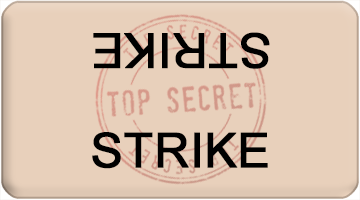
<style>
.page{position:relative;width:360px;height:200px;background:#e8d0bb}
.page>*{position:absolute;margin:0}
.t1{font:48px "ArialMT";color:#000000;font-weight:bold}
</style>
<div class="page">
<p class="t1" style="left:93px;top:32px;width:177px;height:37px;rotate:180deg">STRIKE</p>
<p class="t1" style="left:92px;top:132px;width:176px;height:37px">STRIKE</p>
</div>
